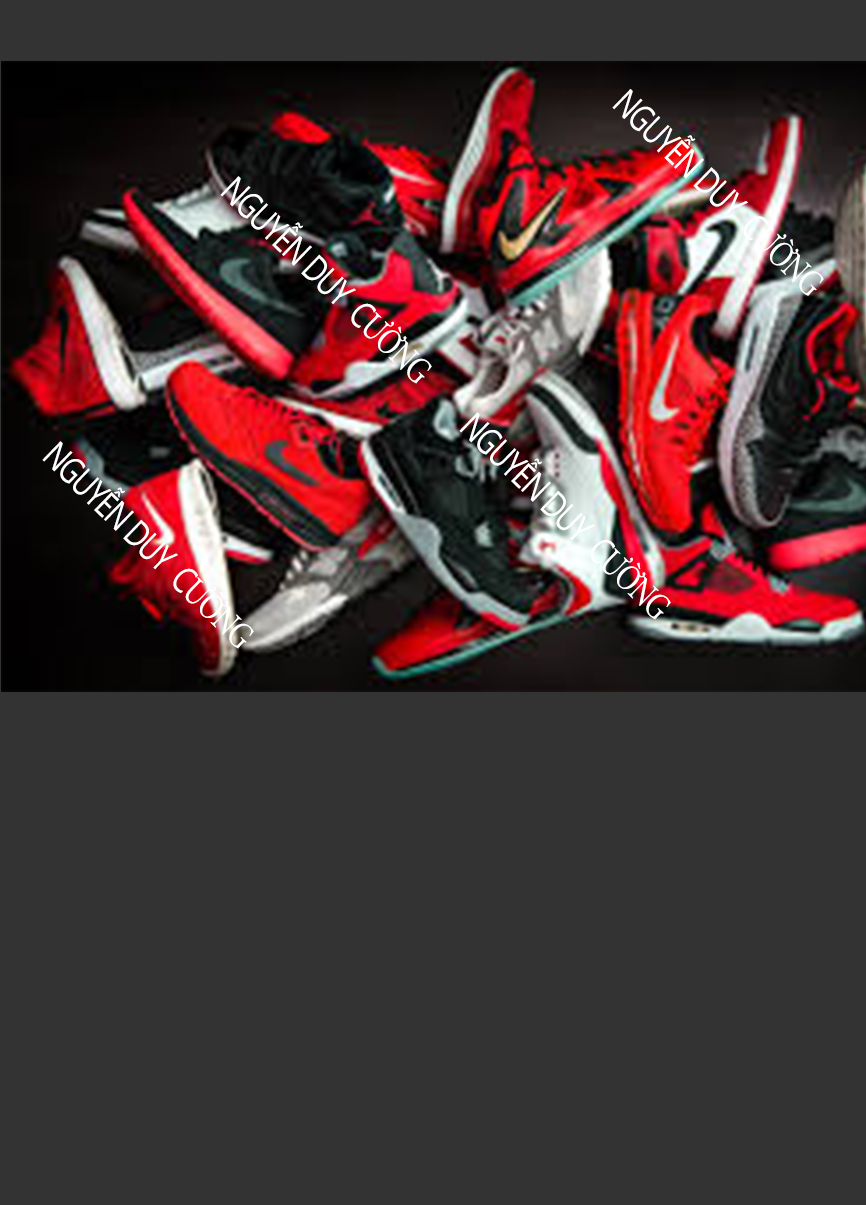
<style>
.page{position:relative;width:866px;height:1205px;background:#333333}
.page>*{position:absolute;margin:0}
.t1{font:37.3px "NirmalaUI";letter-spacing:-0.05em;color:#ffffff;scale:0.79 1}
.t2{font:37.3px "MyriadPro-Regular";letter-spacing:-0.05em;color:#ffffff;scale:0.79 1}
.t3{font:37.3px "MinionPro-Regular";letter-spacing:-0.05em;color:#ffffff;scale:0.79 1}
</style>
<div class="page">
<p class="t1" style="left:612px;top:89px;width:212px;height:207px;rotate:44deg">NGUY<span class="t2">Ễ</span>N DUY  C<span class="t3">ƯỜNG</span></p>
<p class="t1" style="left:220px;top:176px;width:212px;height:208px;rotate:44deg">NGUY<span class="t2">Ễ</span>N DUY  C<span class="t3">ƯỜNG</span></p>
<p class="t1" style="left:459px;top:412px;width:212px;height:208px;rotate:44deg">NGUY<span class="t2">Ễ</span>N DUY  C<span class="t3">ƯỜNG</span></p>
<p class="t1" style="left:42px;top:441px;width:212px;height:208px;rotate:44deg">NGUY<span class="t2">Ễ</span>N DUY  C<span class="t3">ƯỜNG</span></p>
</div>
